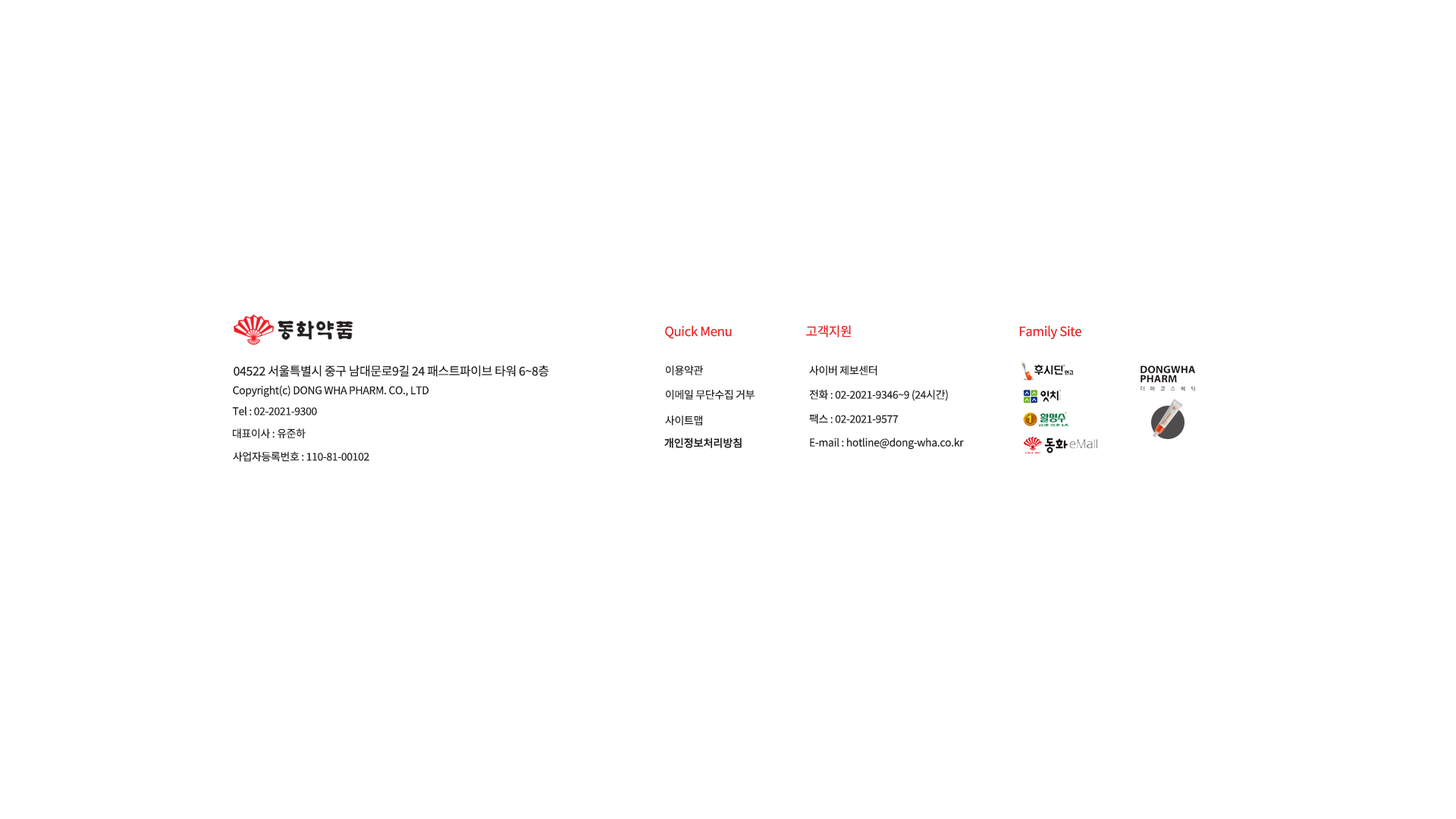
<style>
.page{position:relative;width:1456px;height:819px;background:#ffffff}
.page>*{position:absolute;margin:0}
.t1{font:12.9px "NotoSansKR-Regular";letter-spacing:-0.025em;color:#ed1d24}
.t2{font:12.1px "NotoSansKR-Regular";letter-spacing:-0.025em;color:#231f20}
.t3{font:10.6px "NotoSansKR-Regular";letter-spacing:-0.025em;color:#231f20}
.t4{font:10.6px "NotoSansKR-Regular";letter-spacing:-0.025em;color:#231f20;font-weight:bold}
</style>
<div class="page">
<p class="t1" style="left:665px;top:325px;width:67px;height:14px">Quick Menu</p>
<p class="t1" style="left:806px;top:325px;width:45px;height:12px">고객지원</p>
<p class="t1" style="left:1019px;top:325px;width:62px;height:15px">Family Site</p>
<p class="t2" style="left:234px;top:365px;width:315px;height:12px">04522 서울특별시 중구 남대문로9길 24 패스트파이브 타워 6~8층</p>
<p class="t3" style="left:666px;top:366px;width:37px;height:9px">이용약관</p>
<p class="t3" style="left:809px;top:366px;width:68px;height:9px">사이버 제보센터</p>
<p class="t3" style="left:233px;top:385px;width:196px;height:12px">Copyright(c) DONG WHA PHARM. CO., LTD</p>
<p class="t3" style="left:666px;top:390px;width:89px;height:10px">이메일 무단수집 거부</p>
<p class="t3" style="left:809px;top:390px;width:139px;height:11px">전화 : 02-2021-9346~9 (24시간)</p>
<p class="t3" style="left:232px;top:406px;width:85px;height:10px">Tel : 02-2021-9300</p>
<p class="t3" style="left:665px;top:416px;width:37px;height:9px">사이트맵</p>
<p class="t3" style="left:809px;top:414px;width:90px;height:10px">팩스 : 02-2021-9577</p>
<p class="t3" style="left:233px;top:428px;width:73px;height:10px">대표이사 : 유준하</p>
<p class="t4" style="left:664px;top:438px;width:78px;height:10px">개인정보처리방침</p>
<p class="t3" style="left:810px;top:438px;width:154px;height:12px">E-mail : hotline@dong-wha.co.kr</p>
<p class="t3" style="left:233px;top:451px;width:136px;height:11px">사업자등록번호 : 110-81-00102</p>
</div>
